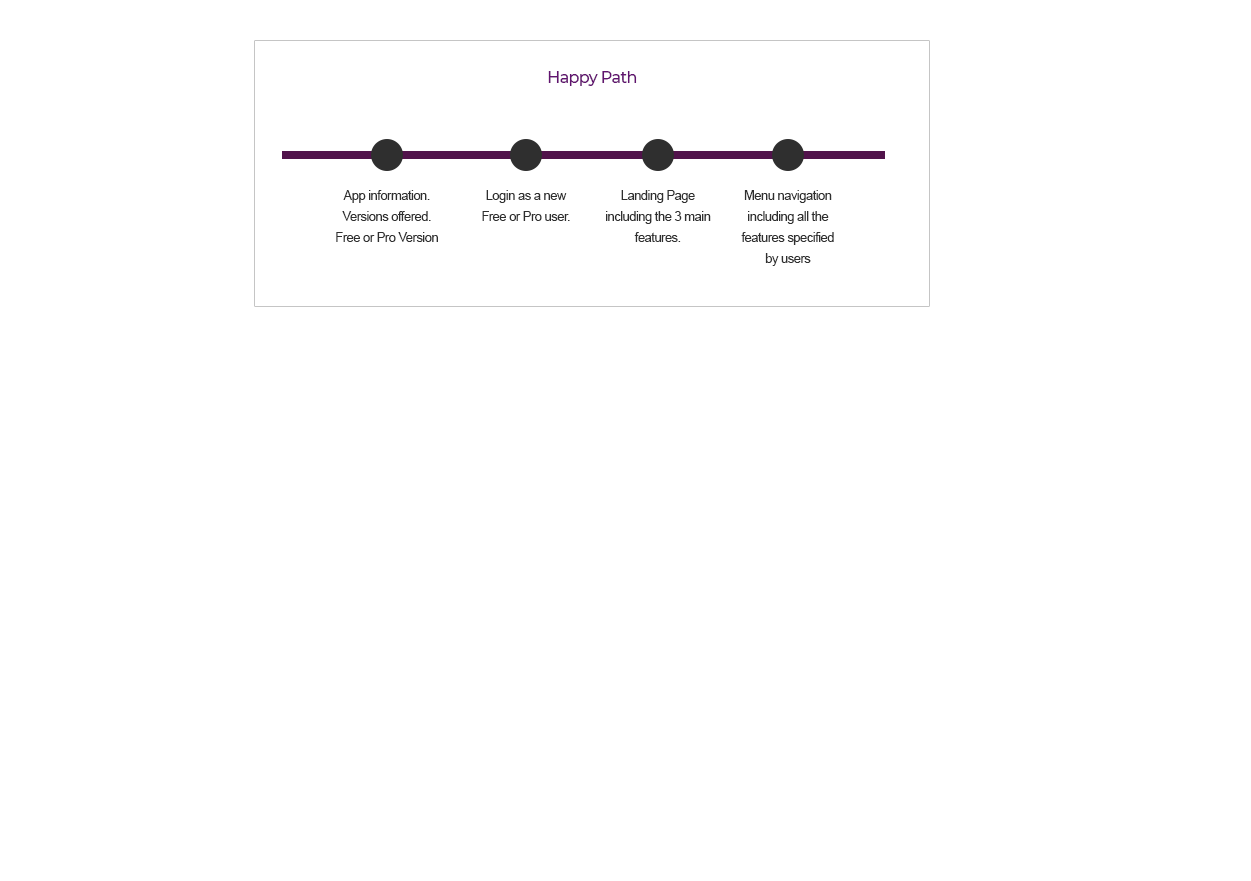
<style>
.page{position:relative;width:1251px;height:881px;background:#ffffff}
.page>*{position:absolute;margin:0}
.t1{font:16px "Montserrat-Medium";letter-spacing:-0.04em;color:#621370}
.t2{font:13px/21px "ArialMT";letter-spacing:-0.04em;color:#2f2f2f}
</style>
<div class="page">
<p class="t1" style="left:548px;top:71px;width:89px;height:15px">Happy Path</p>
<p class="t2" style="left:336px;top:190px;width:102px;height:52px;text-align:center">App information. Versions offered. Free or Pro Version</p>
<p class="t2" style="left:482px;top:190px;width:88px;height:31px;text-align:center">Login as a new Free or Pro user.</p>
<p class="t2" style="left:606px;top:190px;width:105px;height:52px;text-align:center">Landing Page including the 3 main features.</p>
<p class="t2" style="left:741px;top:190px;width:93px;height:76px;text-align:center">Menu navigation including all the features specified by users</p>
</div>
